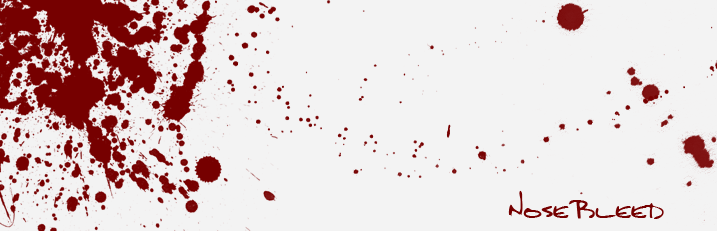
<style>
.page{position:relative;width:717px;height:231px;background:#f3f3f3}
.page>*{position:absolute;margin:0}
.t1{font:30px "KeithsHand-Plain";letter-spacing:-0.01em;color:#760000}
</style>
<div class="page">
<p class="t1" style="left:508px;top:190px;width:156px;height:29px">NoseBleed</p>
</div>
